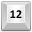
<style>
.page{position:relative;width:32px;height:32px}
.page>*{position:absolute;margin:0}
.t1{font:12px "Calibri-Bold";color:#000000}
</style>
<div class="page">
<p class="t1" style="left:10px;top:10px;width:12px;height:8px">12</p>
</div>
